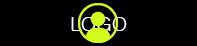
<style>
.page{position:relative;width:197px;height:46px;background:#000000}
.page>*{position:absolute;margin:0}
.t1{font:20px "Gulim";color:#ffffff}
</style>
<div class="page">
<p class="t1" style="left:71px;top:17px;width:56px;height:14px">LOGO</p>
</div>
